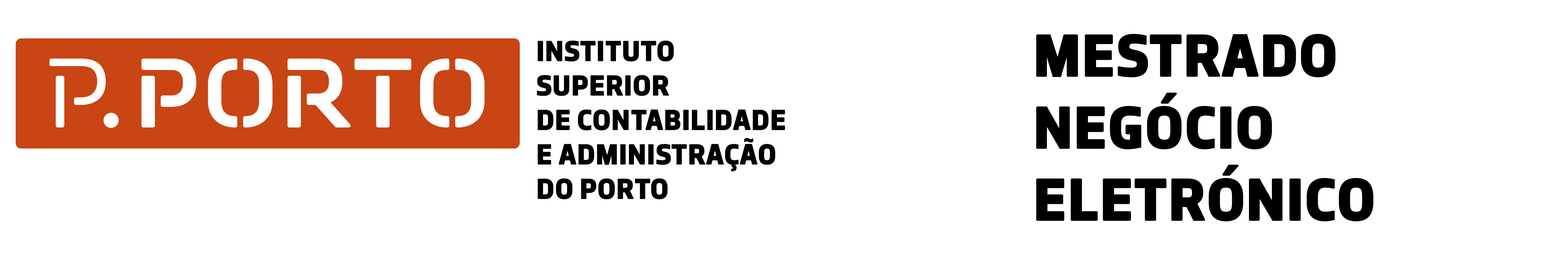
<style>
.page{position:relative;width:1568px;height:261px;background:#ffffff}
.page>*{position:absolute;margin:0}
.t1{font:28.7px "PortoSans-Bold";color:#000000;font-weight:bold}
.t2{font:60.1px "PortoSans-Bold";color:#000000;font-weight:bold}
</style>
<div class="page">
<p class="t1" style="left:537px;top:41px;width:248px;height:159px">INSTITUTO<br>SUPERIOR <br>DE CONTABILIDADE<br>E ADMINISTRAÇÃO <br>DO PORTO</p>
<p class="t2" style="left:1036px;top:34px;width:338px;height:188px">MESTRADO <br>NEGÓCIO<br>ELETRÓNICO</p>
</div>
